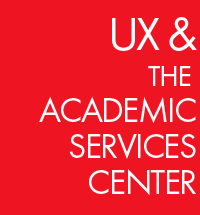
<style>
.page{position:relative;width:200px;height:215px;background:#ef1421}
.page>*{position:absolute;margin:0}
.t1{font:36px/36px "FuturaPT-Book";letter-spacing:-0.05em;color:#fffeff;text-transform:uppercase}
.t2{font:48px/36px "FuturaPT-Book";letter-spacing:-0.05em;color:#fffeff;text-transform:uppercase}
.t3{font:30px/36px "FuturaPT-Book";letter-spacing:-0.05em;color:#fffeff;text-transform:uppercase}
</style>
<div class="page">
<p class="t1" style="left:39px;top:17px;width:158px;height:178px;text-align:right"><span class="t2">ux &amp;<br></span><span class="t3">the <br></span>academic<br>services<br>center</p>
</div>
